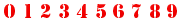
<style>
.page{position:relative;width:180px;height:21px;background:#ffffff}
.page>*{position:absolute;margin:0}
.t1{font:18px "StencilStd";color:#f30000}
.t2{font:18px "StencilStd";color:#f20000}
.t3{font:18px "StencilStd";color:#f30101}
</style>
<div class="page">
<p class="t1" style="left:4px;top:4px;width:11px;height:14px">0</p>
<p class="t2" style="left:25px;top:4px;width:7px;height:14px">1</p>
<p class="t2" style="left:41px;top:4px;width:10px;height:14px">2</p>
<p class="t2" style="left:59px;top:4px;width:10px;height:14px">3</p>
<p class="t1" style="left:76px;top:4px;width:12px;height:14px">4</p>
<p class="t2" style="left:96px;top:4px;width:10px;height:14px">5</p>
<p class="t3" style="left:113px;top:4px;width:11px;height:14px">6</p>
<p class="t2" style="left:132px;top:4px;width:9px;height:14px">7</p>
<p class="t1" style="left:150px;top:4px;width:10px;height:14px">8</p>
<p class="t2" style="left:167px;top:4px;width:10px;height:14px">9</p>
</div>
